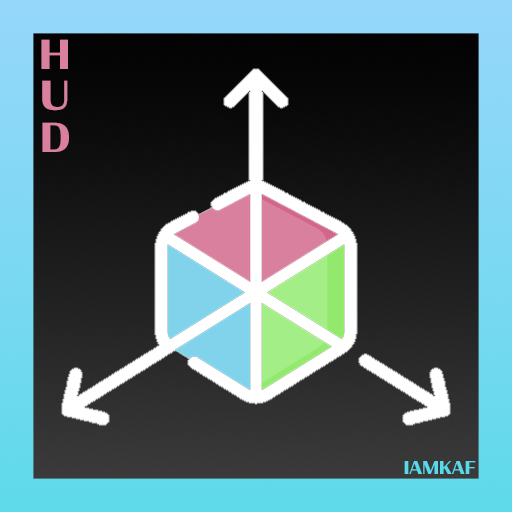
<style>
.page{position:relative;width:512px;height:512px}
.page>*{position:absolute;margin:0}
.t1{font:39.7px/41.3px "Condor-Bold";color:#da809f;text-transform:uppercase}
.t2{font:17.6px "Condor-Bold";color:#59daea;text-transform:uppercase}
</style>
<div class="page">
<p class="t1" style="left:41px;top:39px;width:28px;height:113px;text-align:center">H<br>U<br>D</p>
<p class="t2" style="left:404px;top:461px;width:72px;height:13px">iamkaf</p>
</div>
